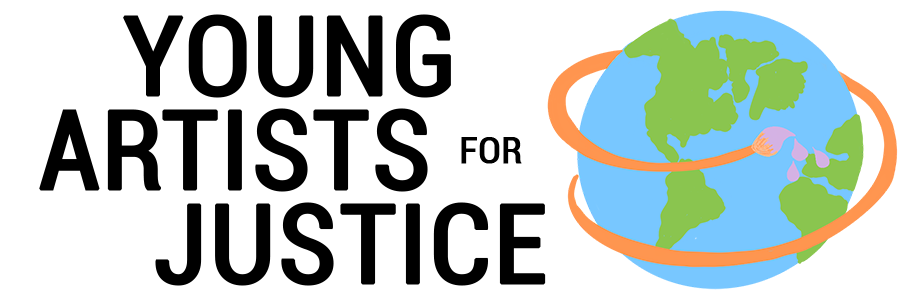
<style>
.page{position:relative;width:920px;height:300px;background:#ffffff}
.page>*{position:absolute;margin:0}
.t1{font:110px "Roboto-Condensed";color:#000000;font-weight:bold}
.t2{font:37px "Roboto-Condensed";color:#000000;font-weight:bold}
</style>
<div class="page">
<p class="t1" style="left:123px;top:14px;width:328px;height:84px">YOUNG</p>
<p class="t1" style="left:39px;top:108px;width:389px;height:84px">ARTISTS</p>
<p class="t2" style="left:461px;top:137px;width:61px;height:27px">FOR</p>
<p class="t1" style="left:155px;top:202px;width:391px;height:84px">JUSTICE</p>
</div>
